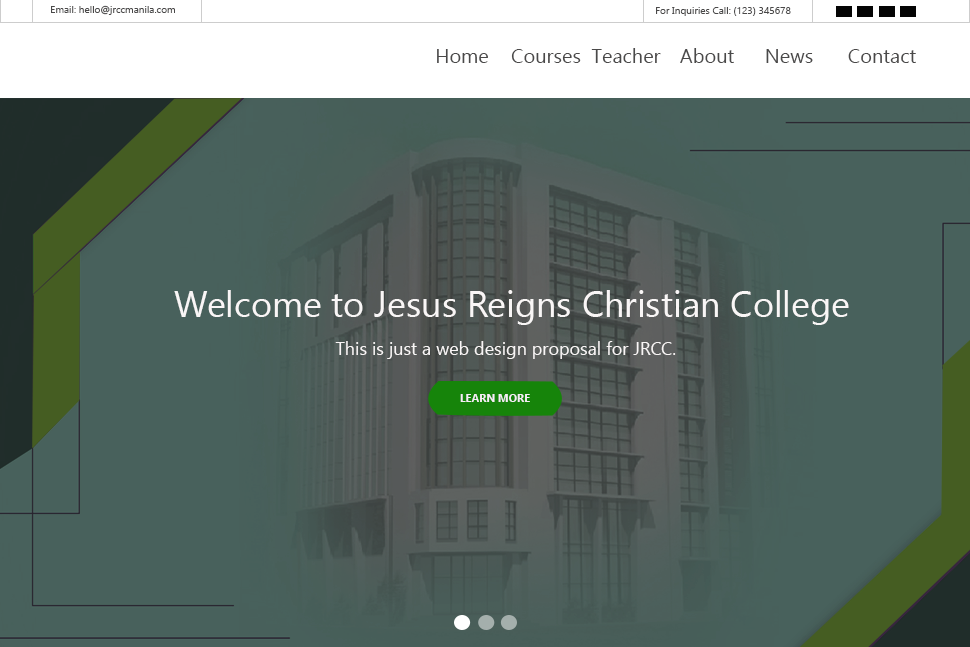
<style>
.page{position:relative;width:970px;height:647px;background:#48615c}
.page>*{position:absolute;margin:0}
.t1{font:10px "Ebrima";color:#4a4949}
.t2{font:20px "Ebrima";color:#4b4a4a}
.t3{font:20px "Ebrima";color:#4a4949}
.t4{font:36px "NirmalaUI";color:#f9f6f6}
.t5{font:18px "NirmalaUI";color:#f9f6f6}
.t6{font:11px "Ebrima-Bold";color:#f7eff6}
</style>
<div class="page">
<p class="t1" style="left:51px;top:5px;width:124px;height:10px">Email: hello@jrccmanila.com</p>
<p class="t1" style="left:656px;top:7px;width:135px;height:9px">For Inquiries Call: (123) 345678</p>
<p class="t2" style="left:437px;top:49px;width:51px;height:14px">Home</p>
<p class="t3" style="left:511px;top:49px;width:70px;height:14px">Courses</p>
<p class="t3" style="left:591px;top:48px;width:70px;height:15px">Teacher</p>
<p class="t3" style="left:680px;top:48px;width:54px;height:15px">About</p>
<p class="t3" style="left:766px;top:49px;width:47px;height:14px">News</p>
<p class="t3" style="left:848px;top:49px;width:68px;height:14px">Contact</p>
<p class="t4" style="left:174px;top:290px;width:675px;height:35px">Welcome to Jesus Reigns Christian College</p>
<p class="t5" style="left:335px;top:341px;width:341px;height:18px">This is just a web design proposal for JRCC.</p>
<p class="t6" style="left:460px;top:394px;width:70px;height:8px">LEARN MORE</p>
</div>
